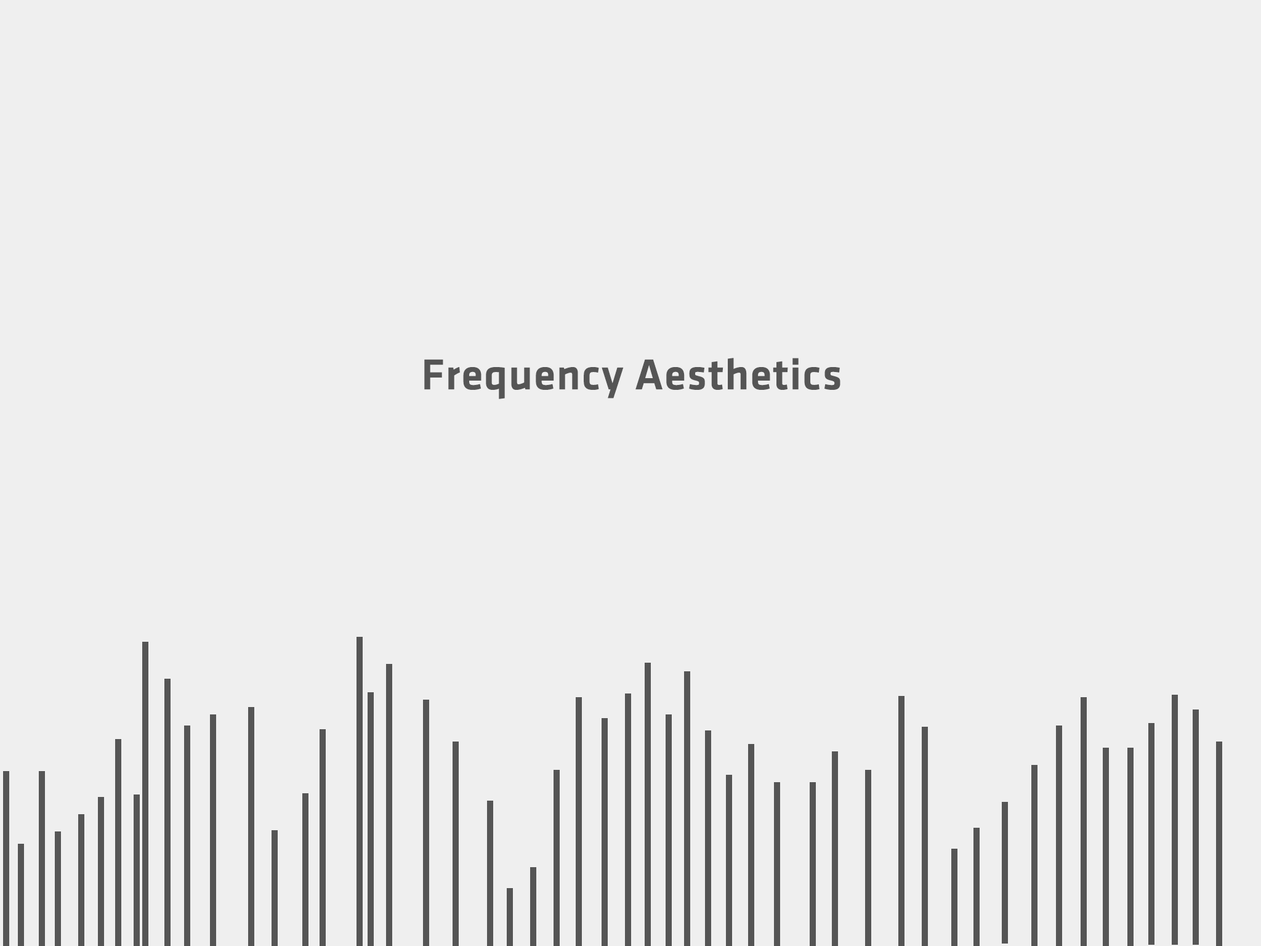
<style>
.page{position:relative;width:1261px;height:946px;background:#efefef}
.page>*{position:absolute;margin:0}
.t1{font:44.3px "Klavika-Medium";color:#555555;font-weight:bold}
</style>
<div class="page">
<p class="t1" style="left:424px;top:358px;width:416px;height:41px">Frequency Aesthetics</p>
</div>
